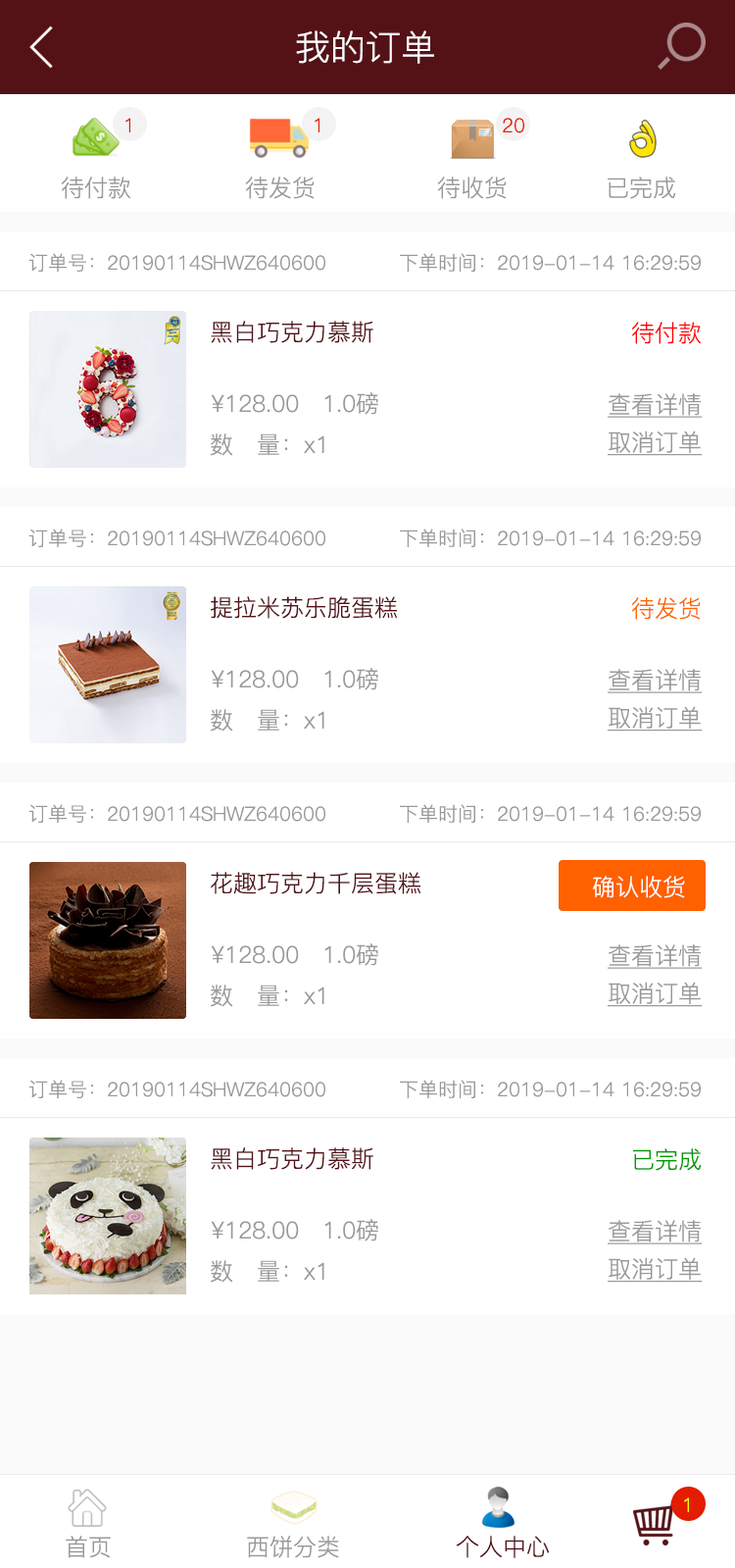
<style>
.page{position:relative;width:735px;height:1568px;background:#ffffff}
.page>*{position:absolute;margin:0}
.t1{font:35.3px "PingFang-SC-Regular";color:#ffffff}
.t2{font:19.6px "PingFang-SC-Regular";color:#e41c01}
.t3{font:23.5px "PingFang-SC-Regular";color:#999999}
.t4{font:19.6px "PingFang-SC-Regular";color:#999999}
.t5{font:23.5px "PingFang-SC-Regular";color:#541217}
.t6{font:23.5px "PingFang-SC-Regular";color:#ff0000}
.t7{font:23.5px/37.7px "PingFang-SC-Regular";color:#999999;text-decoration:underline}
.t8{font:23.5px "PingFang-SC-Regular";color:#ff6600}
.t9{font:23.5px "PingFang-SC-Regular";color:#ffffff}
.t10{font:23.5px "PingFang-SC-Regular";color:#009900}
.t11{font:19.6px "PingFang-SC-Regular";color:#ffff00}
</style>
<div class="page">
<p class="t1" style="left:296px;top:30px;width:138px;height:34px">我的订单</p>
<p class="t2" style="left:126px;top:118px;width:4px;height:14px">1</p>
<p class="t2" style="left:315px;top:118px;width:5px;height:14px">1</p>
<p class="t2" style="left:503px;top:118px;width:22px;height:15px">20</p>
<p class="t3" style="left:61px;top:177px;width:69px;height:22px">待付款</p>
<p class="t3" style="left:245px;top:177px;width:70px;height:22px">待发货</p>
<p class="t3" style="left:437px;top:177px;width:70px;height:22px">待收货</p>
<p class="t3" style="left:608px;top:177px;width:69px;height:22px">已完成</p>
<p class="t4" style="left:28px;top:253px;width:298px;height:19px">订单号：20190114SHWZ640600</p>
<p class="t4" style="left:400px;top:253px;width:301px;height:19px">下单时间：2019-01-14 16:29:59</p>
<p class="t5" style="left:211px;top:321px;width:163px;height:22px">黑白巧克力慕斯</p>
<p class="t6" style="left:632px;top:322px;width:69px;height:22px">待付款</p>
<p class="t3" style="left:211px;top:392px;width:168px;height:23px">¥128.00   1.0磅</p>
<p class="t7" style="left:608px;top:393px;width:95px;height:63px">查看详情<br>取消订单</p>
<p class="t3" style="left:211px;top:433px;width:114px;height:23px">数   量：x1</p>
<p class="t4" style="left:28px;top:529px;width:298px;height:18px">订单号：20190114SHWZ640600</p>
<p class="t4" style="left:400px;top:529px;width:301px;height:18px">下单时间：2019-01-14 16:29:59</p>
<p class="t5" style="left:211px;top:596px;width:186px;height:23px">提拉米苏乐脆蛋糕</p>
<p class="t8" style="left:632px;top:597px;width:69px;height:23px">待发货</p>
<p class="t3" style="left:211px;top:668px;width:168px;height:22px">¥128.00   1.0磅</p>
<p class="t7" style="left:608px;top:669px;width:95px;height:63px">查看详情<br>取消订单</p>
<p class="t3" style="left:211px;top:709px;width:114px;height:23px">数   量：x1</p>
<p class="t4" style="left:28px;top:804px;width:298px;height:19px">订单号：20190114SHWZ640600</p>
<p class="t4" style="left:400px;top:804px;width:301px;height:19px">下单时间：2019-01-14 16:29:59</p>
<p class="t5" style="left:211px;top:872px;width:210px;height:22px">花趣巧克力千层蛋糕</p>
<p class="t9" style="left:593px;top:876px;width:92px;height:22px">确认收货</p>
<p class="t3" style="left:211px;top:943px;width:168px;height:23px">¥128.00   1.0磅</p>
<p class="t7" style="left:608px;top:944px;width:95px;height:63px">查看详情<br>取消订单</p>
<p class="t3" style="left:211px;top:985px;width:114px;height:22px">数   量：x1</p>
<p class="t4" style="left:28px;top:1080px;width:298px;height:18px">订单号：20190114SHWZ640600</p>
<p class="t4" style="left:400px;top:1080px;width:301px;height:18px">下单时间：2019-01-14 16:29:59</p>
<p class="t5" style="left:211px;top:1147px;width:163px;height:23px">黑白巧克力慕斯</p>
<p class="t10" style="left:633px;top:1148px;width:69px;height:23px">已完成</p>
<p class="t3" style="left:211px;top:1219px;width:168px;height:22px">¥128.00   1.0磅</p>
<p class="t7" style="left:608px;top:1220px;width:95px;height:63px">查看详情<br>取消订单</p>
<p class="t3" style="left:211px;top:1260px;width:114px;height:23px">数   量：x1</p>
<p class="t11" style="left:684px;top:1497px;width:5px;height:15px">1</p>
<p class="t3" style="left:66px;top:1536px;width:45px;height:22px">首页</p>
<p class="t3" style="left:247px;top:1536px;width:92px;height:22px">西饼分类</p>
<p class="t5" style="left:456px;top:1536px;width:94px;height:22px">个人中心</p>
</div>
